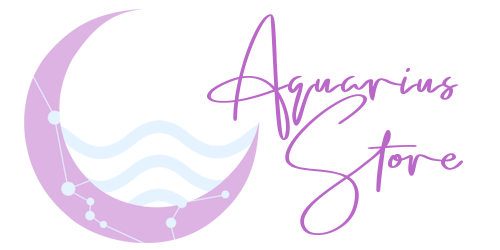
<style>
.page{position:relative;width:500px;height:250px;background:#ffffff}
.page>*{position:absolute;margin:0}
.t1{font:152.8px "EmmylouSignature-Bold";color:#ba68c8}
</style>
<div class="page">
<p class="t1" style="left:207px;top:14px;width:252px;height:126px">Aquarius</p>
<p class="t1" style="left:285px;top:94px;width:178px;height:141px">Store</p>
</div>
